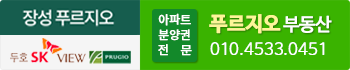
<style>
.page{position:relative;width:350px;height:70px;background:#3ab300}
.page>*{position:absolute;margin:0}
.t1{font:12px/15px "NotoSansMonoCJKkr-Regular";letter-spacing:-0.025em;color:#ffffff;font-weight:bold}
.t2{font:20px "NanumBarunGothicOTFBold";letter-spacing:-0.025em;color:#fdf598;font-weight:bold}
.t3{font:18px "NanumBarunGothicOTF";letter-spacing:-0.025em;color:#ffffff;font-weight:bold}
.t4{font:16px "NanumBarunGothicOTFUltraLight";color:#ffffff;font-weight:bold}
</style>
<div class="page">
<p class="t1" style="left:158px;top:13px;width:34px;height:43px;text-align:center">아파트<br>분양권<br>전  문</p>
<p class="t2" style="left:209px;top:14px;width:123px;height:20px">푸르지오 <span class="t3">부동산</span></p>
<p class="t4" style="left:210px;top:42px;width:115px;height:13px">010.4533.0451</p>
</div>
